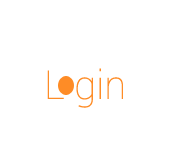
<style>
.page{position:relative;width:185px;height:166px;background:#ffffff}
.page>*{position:absolute;margin:0}
.t1{font:40px "Roboto-Thin";color:#fe8c26}
</style>
<div class="page">
<p class="t1" style="left:47px;top:68px;width:76px;height:40px">L gin</p>
</div>
